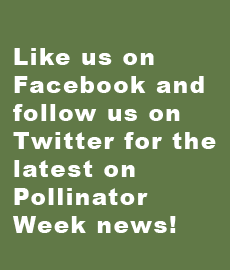
<style>
.page{position:relative;width:230px;height:270px;background:#617947}
.page>*{position:absolute;margin:0}
.t1{font:23px/28px "Arial-Black";letter-spacing:0.065em;color:#ffffff}
</style>
<div class="page">
<p class="t1" style="left:13px;top:48px;width:203px;height:185px">Like us on Facebook and follow us on Twitter for the latest on Pollinator Week news!</p>
</div>
